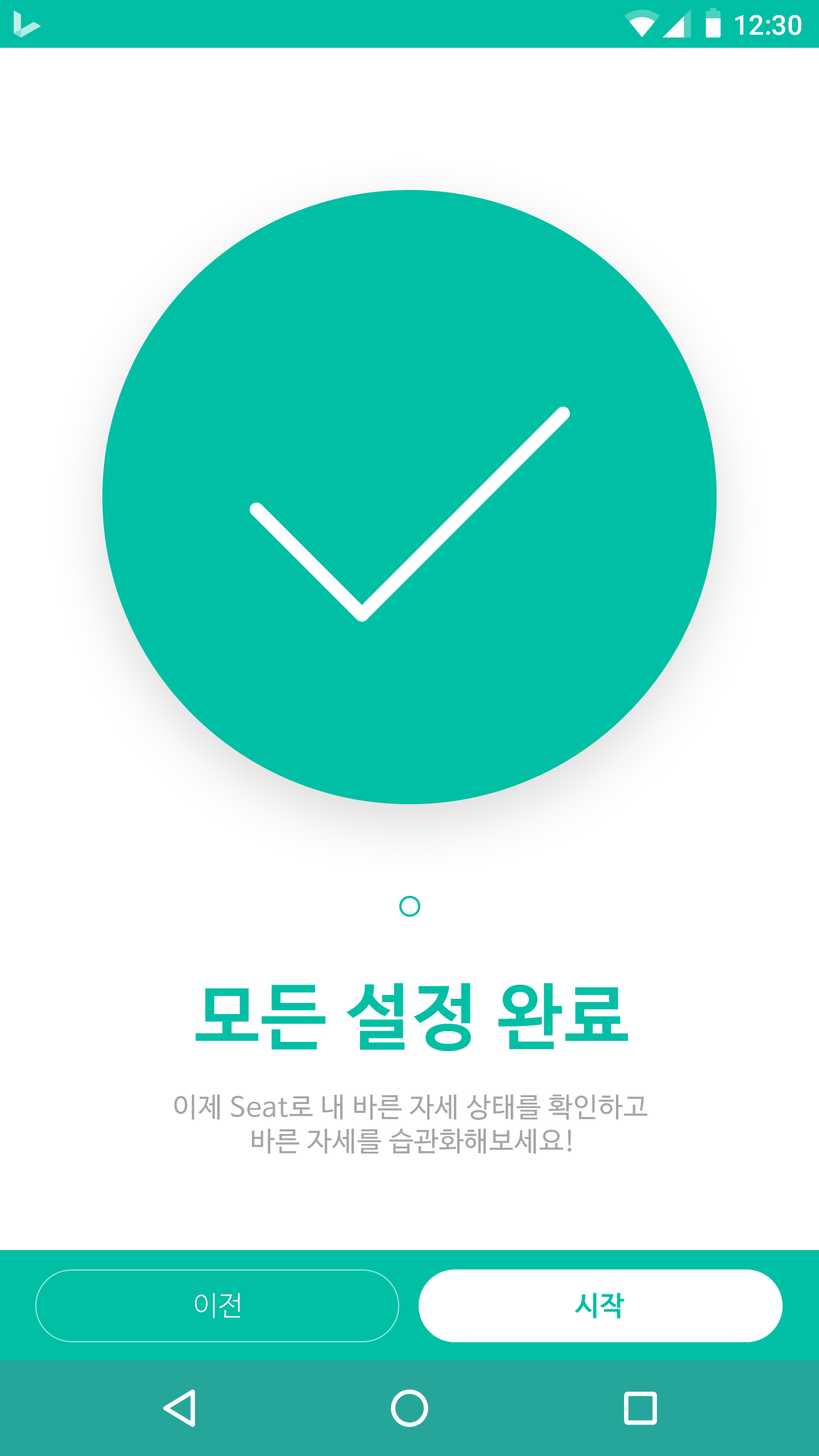
<style>
.page{position:relative;width:819px;height:1456px;background:#ffffff}
.page>*{position:absolute;margin:0}
.t1{font:27.3px "Roboto-Medium";color:#ffffff}
.t2{font:72.8px "NanumBarunGothicBold";letter-spacing:0.025em;color:#00bfa5}
.t3{font:27.3px/34.1px "NanumBarunGothic";letter-spacing:0.025em;color:#a5a5a5}
.t4{font:27.3px "NanumBarunGothicLight";letter-spacing:0.025em;color:#fafafa}
.t5{font:27.3px "NanumBarunGothicBold";letter-spacing:0.025em;color:#00bfa5}
</style>
<div class="page">
<p class="t1" style="left:735px;top:15px;width:66px;height:20px">12:30</p>
<p class="t2" style="left:196px;top:983px;width:432px;height:68px">모든 설정 완료</p>
<p class="t3" style="left:174px;top:1094px;width:473px;height:60px;text-align:center">이제 Seat로 내 바른 자세 상태를 확인하고 <br>바른 자세를 습관화해보세요!</p>
<p class="t4" style="left:195px;top:1293px;width:45px;height:25px">이전</p>
<p class="t5" style="left:574px;top:1293px;width:50px;height:25px">시작</p>
</div>
